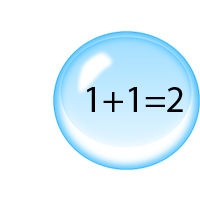
<style>
.page{position:relative;width:200px;height:200px;background:#ffffff}
.page>*{position:absolute;margin:0}
.t1{font:37.5px "MyriadPro-Regular";color:#000000}
</style>
<div class="page">
<p class="t1" style="left:86px;top:87px;width:97px;height:25px">1+1=2</p>
</div>
